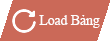
<style>
.page{position:relative;width:110px;height:41px;background:#cb6958}
.page>*{position:absolute;margin:0}
.t1{font:13.7px "TimesNewRomanPSMT";color:#fefefe}
</style>
<div class="page">
<p class="t1" style="left:39px;top:15px;width:61px;height:13px">Load Bảng</p>
</div>
